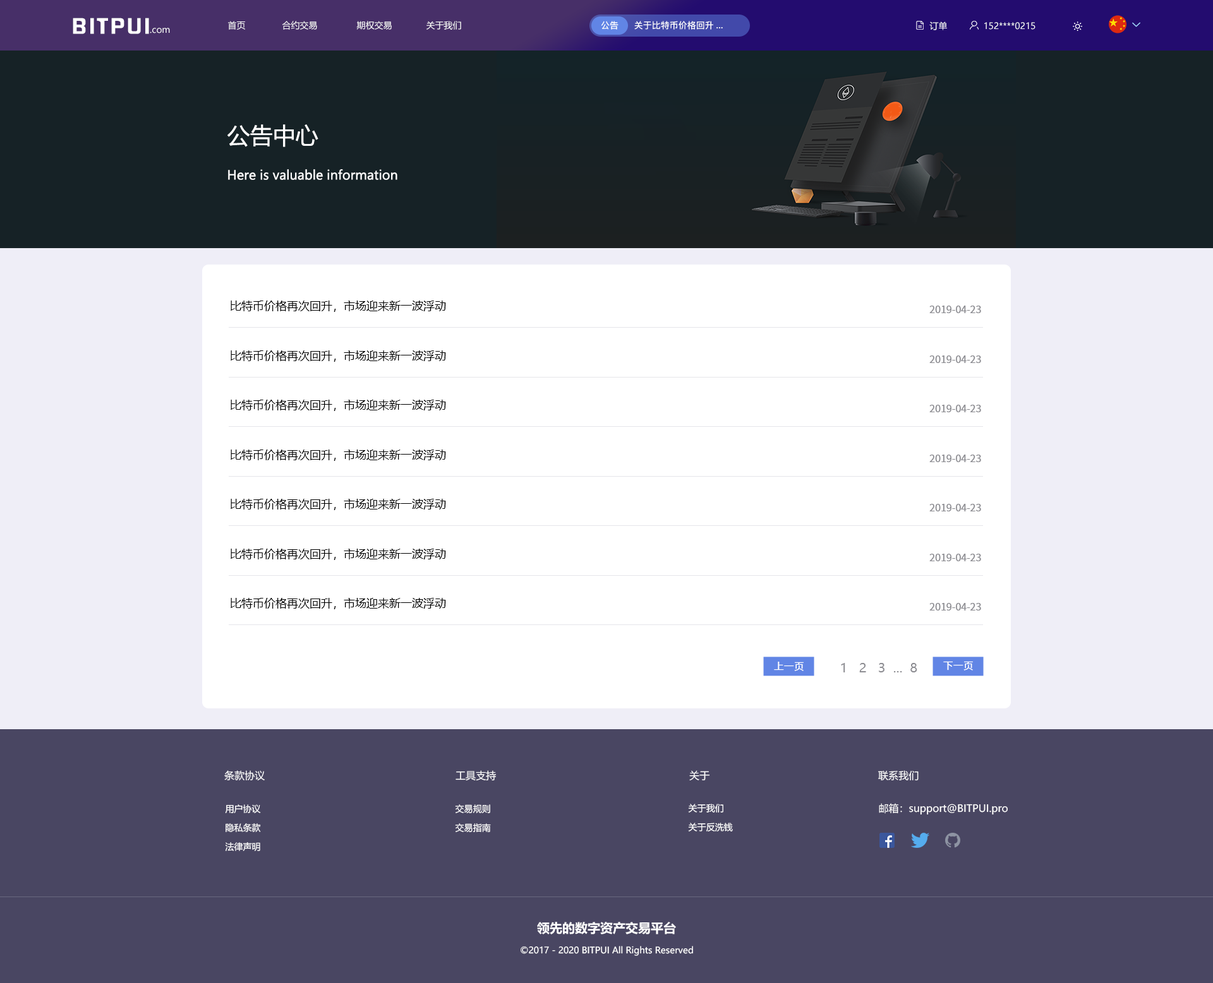
<style>
.page{position:relative;width:1213px;height:983px;background:#ffffff}
.page>*{position:absolute;margin:0}
.t1{font:19.4px "FZHZGBJW--GB1-0";letter-spacing:0.1em;color:#ffffff;scale:1.14 1}
.t2{font:8.8px "MicrosoftYaHei";color:#ffffff}
.t3{font:8.8px "PingFang-SC-Bold";color:#ffffff}
.t4{font:22.7px "MicrosoftYaHei";color:#ffffff}
.t5{font:12.6px "MicrosoftYaHei";color:#ffffff}
.t6{font:11.4px "MicrosoftYaHei";color:#000000}
.t7{font:10.1px "SourceHanSansCN-Regular";color:#8e8e93}
.t8{font:10.1px "SourceHanSansCN-Regular";color:#ffffff}
.t9{font:12.6px "MicrosoftYaHei";color:#8e8e93}
.t10{font:10.1px "MicrosoftYaHei";color:#ffffff}
.t11{font:8.8px/18.9px "MicrosoftYaHei";color:#ffffff}
.t12{font:12.6px "MicrosoftYaHei-Bold";color:#ffffff}
</style>
<div class="page">
<p class="t1" style="left:73px;top:18px;width:76px;height:16px">BITPUI</p>
<p class="t2" style="left:150px;top:28px;width:20px;height:5px">.com</p>
<p class="t2" style="left:228px;top:21px;width:233px;height:9px">首页              合约交易               期权交易             关于我们</p>
<p class="t3" style="left:601px;top:21px;width:17px;height:9px">公告</p>
<p class="t3" style="left:634px;top:21px;width:89px;height:9px">关于比特币价格回升...</p>
<p class="t2" style="left:929px;top:21px;width:18px;height:9px">订单</p>
<p class="t2" style="left:984px;top:22px;width:51px;height:8px">152****0215</p>
<p class="t4" style="left:227px;top:124px;width:91px;height:23px">公告中心</p>
<p class="t5" style="left:228px;top:169px;width:169px;height:11px">Here is valuable information</p>
<p class="t6" style="left:231px;top:301px;width:215px;height:11px">比特币价格再次回升，市场迎来新一波浮动</p>
<p class="t7" style="left:929px;top:306px;width:52px;height:7px">2019-04-23</p>
<p class="t6" style="left:231px;top:351px;width:215px;height:11px">比特币价格再次回升，市场迎来新一波浮动</p>
<p class="t7" style="left:929px;top:356px;width:52px;height:7px">2019-04-23</p>
<p class="t6" style="left:231px;top:400px;width:215px;height:11px">比特币价格再次回升，市场迎来新一波浮动</p>
<p class="t7" style="left:929px;top:405px;width:52px;height:7px">2019-04-23</p>
<p class="t6" style="left:231px;top:450px;width:215px;height:11px">比特币价格再次回升，市场迎来新一波浮动</p>
<p class="t7" style="left:929px;top:455px;width:52px;height:7px">2019-04-23</p>
<p class="t6" style="left:231px;top:499px;width:215px;height:11px">比特币价格再次回升，市场迎来新一波浮动</p>
<p class="t7" style="left:929px;top:504px;width:52px;height:8px">2019-04-23</p>
<p class="t6" style="left:231px;top:549px;width:215px;height:11px">比特币价格再次回升，市场迎来新一波浮动</p>
<p class="t7" style="left:929px;top:554px;width:52px;height:7px">2019-04-23</p>
<p class="t6" style="left:231px;top:598px;width:215px;height:11px">比特币价格再次回升，市场迎来新一波浮动</p>
<p class="t7" style="left:929px;top:603px;width:52px;height:8px">2019-04-23</p>
<p class="t8" style="left:774px;top:662px;width:29px;height:9px">上一页</p>
<p class="t9" style="left:841px;top:663px;width:76px;height:10px">1   2   3  ...  8</p>
<p class="t8" style="left:943px;top:661px;width:30px;height:10px">下一页</p>
<p class="t10" style="left:224px;top:771px;width:41px;height:10px">条款协议</p>
<p class="t10" style="left:455px;top:771px;width:41px;height:10px">工具支持</p>
<p class="t10" style="left:689px;top:771px;width:21px;height:10px">关于</p>
<p class="t10" style="left:878px;top:771px;width:40px;height:10px">联系我们</p>
<p class="t11" style="left:225px;top:805px;width:36px;height:46px;text-align:center">用户协议<br>隐私条款<br>法律声明</p>
<p class="t11" style="left:455px;top:805px;width:36px;height:27px">交易规则<br>交易指南</p>
<p class="t11" style="left:688px;top:804px;width:45px;height:28px">关于我们<br>关于反洗钱</p>
<p class="t10" style="left:879px;top:803px;width:128px;height:12px">邮箱：support@BITPUI.pro</p>
<p class="t12" style="left:537px;top:922px;width:139px;height:13px">领先的数字资产交易平台</p>
<p class="t2" style="left:520px;top:946px;width:173px;height:10px">©2017 - 2020 BITPUI All Rights Reserved</p>
</div>
